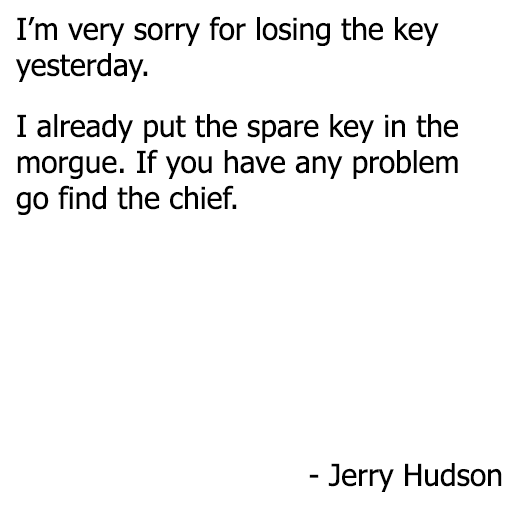
<style>
.page{position:relative;width:512px;height:512px;background:#ffffff}
.page>*{position:absolute;margin:0}
.t1{font:30px "Tahoma";color:#000000}
</style>
<div class="page">
<p class="t1" style="left:16px;top:16px;width:423px;height:66px;text-align:right">I’m very sorry for losing the key yesterday.</p>
<p class="t1" style="left:16px;top:114px;width:442px;height:101px;text-align:right">I already put the spare key in the morgue. If you have any problem go find the chief.</p>
<p class="t1" style="left:309px;top:463px;width:193px;height:29px">- Jerry Hudson</p>
</div>
